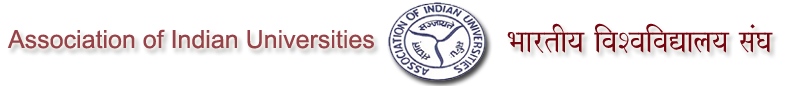
<style>
.page{position:relative;width:796px;height:86px;background:#ffffff}
.page>*{position:absolute;margin:0}
.t1{font:25px "ArialMT";color:#974248}
.t2{font:37.5px "Shusha";color:#76050f}
.t3{font:37.5px "Shusha";color:#930621}
</style>
<div class="page">
<p class="t1" style="left:7px;top:29px;width:367px;height:20px">Association of Indian Universities</p>
<p class="t2" style="left:507px;top:23px;width:266px;height:30px"><span class="t3"><br></span>BaartIya ivaSvaivaValaya saMGa</p>
</div>
